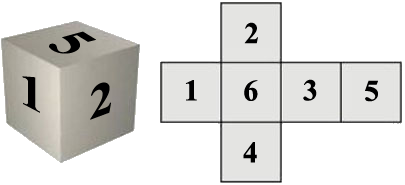
<style>
.page{position:relative;width:405px;height:185px;background:#ffffff}
.page>*{position:absolute;margin:0}
.t1{font:30px "TimesNewRomanPS-BoldMT";color:#000000}
.t2{font:53.4px "TimesNewRomanPS-BoldMT";color:#000000;scale:0.93 1}
.t3{font:48px "TimesNewRomanPS-BoldMT";color:#000000;scale:1.13 1}
.t4{font:48px "TimesNewRomanPS-BoldMT";color:#000000;scale:1.07 1}
</style>
<div class="page">
<p class="t1" style="left:244px;top:22px;width:14px;height:22px">2</p>
<p class="t2" style="left:49px;top:31px;width:47px;height:23px;rotate:31deg">5</p>
<p class="t3" style="left:22px;top:76px;width:18px;height:37px;rotate:28deg">1</p>
<p class="t4" style="left:90px;top:82px;width:21px;height:38px;rotate:-20deg">2</p>
<p class="t1" style="left:185px;top:80px;width:12px;height:21px">1</p>
<p class="t1" style="left:244px;top:80px;width:14px;height:21px">6</p>
<p class="t1" style="left:303px;top:79px;width:14px;height:22px">3</p>
<p class="t1" style="left:365px;top:80px;width:13px;height:22px">5</p>
<p class="t1" style="left:243px;top:142px;width:14px;height:21px">4</p>
</div>
